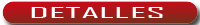
<style>
.page{position:relative;width:200px;height:25px}
.page>*{position:absolute;margin:0}
.t1{font:14.5px "AgencyFB-Reg";color:#ffffff;scale:3.14 1}
</style>
<div class="page">
<p class="t1" style="left:31px;top:7px;width:132px;height:11px">DETALLES</p>
</div>
